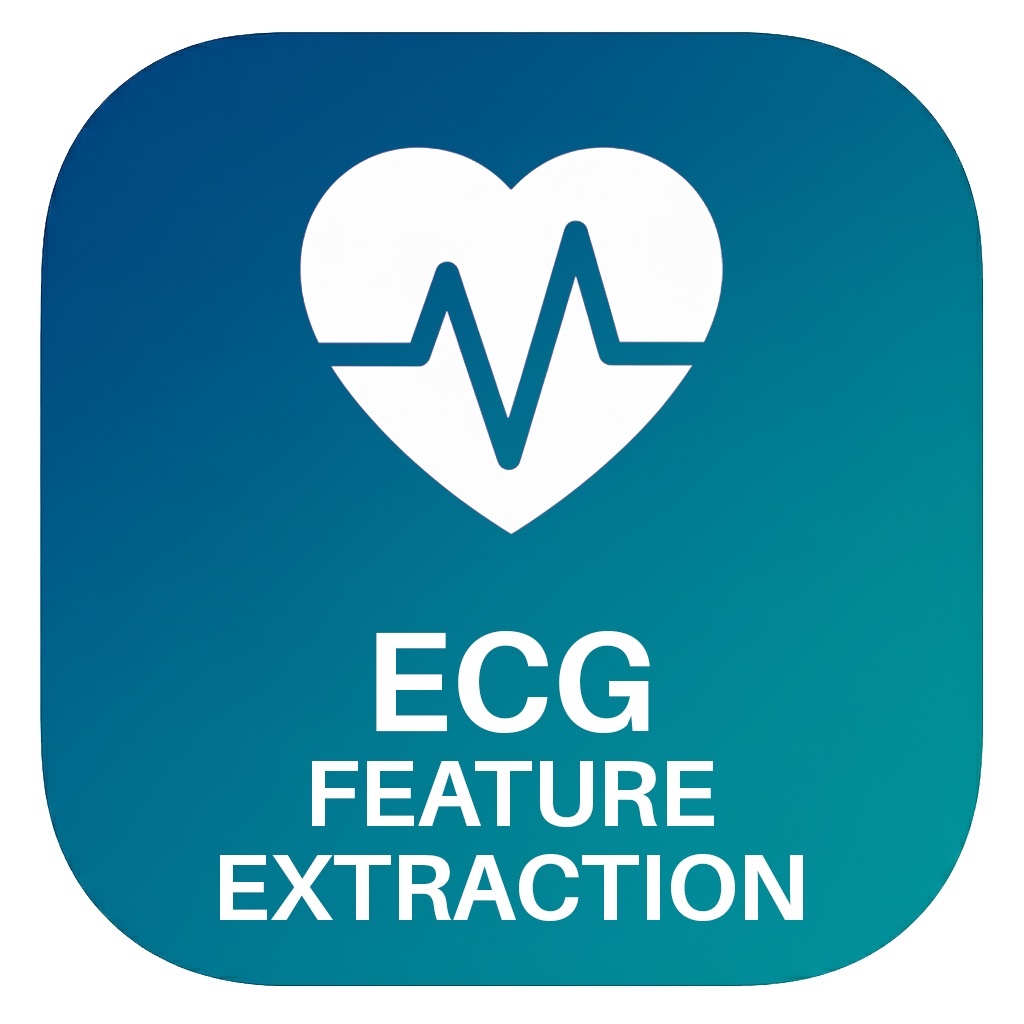
<style>
.page{position:relative;width:1024px;height:1024px;background:#ffffff}
.page>*{position:absolute;margin:0}
.t1{font:94.3px/94.3px "Aileron-Bold";letter-spacing:-0.005em;color:#ffffff}
.t2{font:141.5px/94.3px "Aileron-Bold";letter-spacing:-0.005em;color:#ffffff}
</style>
<div class="page">
<p class="t1" style="left:220px;top:631px;width:583px;height:290px;text-align:center"><span class="t2">ECG<br></span>FEATURE<br>EXTRACTION</p>
</div>
